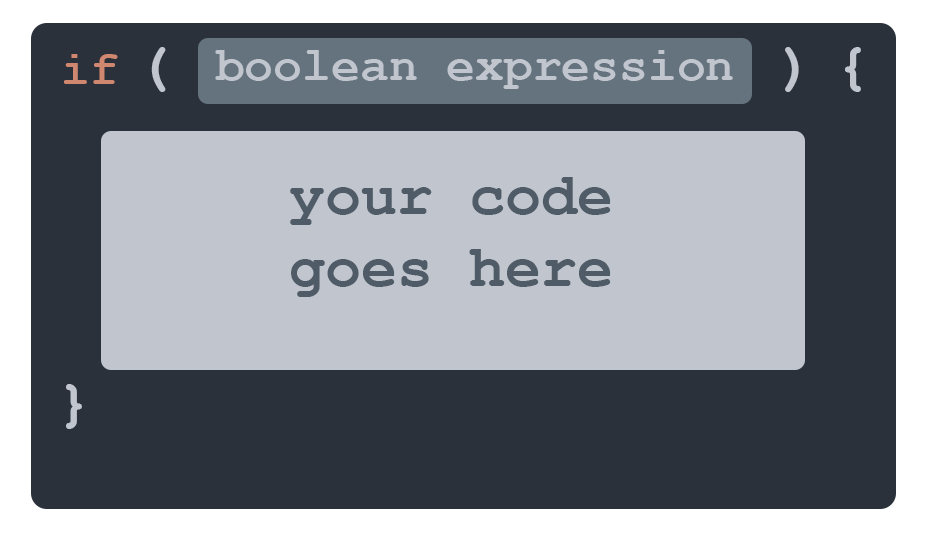
<style>
.page{position:relative;width:926px;height:540px;background:#2b313b}
.page>*{position:absolute;margin:0}
.t1{font:48px "CourierNewPS-BoldMT";color:#d08770}
.t2{font:60px "CourierNewPS-BoldMT";color:#c0c5ce}
.t3{font:48px "CourierNewPS-BoldMT";color:#c0c5ce}
.t4{font:60px/12px "CourierNewPS-BoldMT";color:#4f5b66}
</style>
<div class="page">
<p class="t1" style="left:64px;top:54px;width:54px;height:30px">if</p>
<p class="t2" style="left:151px;top:47px;width:15px;height:45px">(</p>
<p class="t3" style="left:215px;top:50px;width:518px;height:39px">boolean expression</p>
<p class="t2" style="left:785px;top:47px;width:14px;height:45px">)</p>
<p class="t2" style="left:845px;top:47px;width:16px;height:45px">{</p>
<p class="t4" style="left:290px;top:177px;width:321px;height:120px">your code<br><br><br><br><br><br>goes here</p>
<p class="t2" style="left:66px;top:384px;width:16px;height:45px">}</p>
</div>
